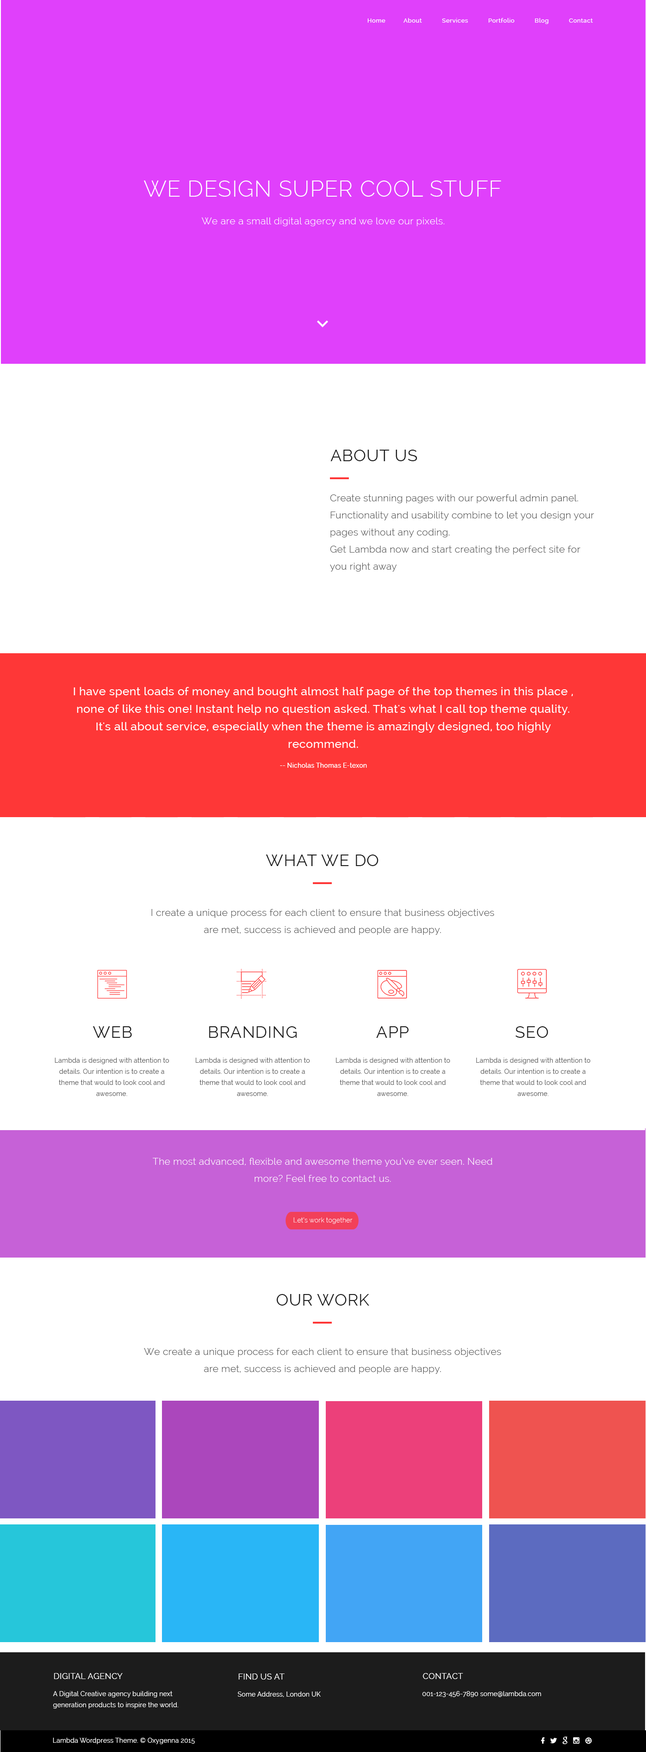
<style>
.page{position:relative;width:646px;height:1752px;background:#ffffff}
.page>*{position:absolute;margin:0}
.t1{font:6px "Raleway-Medium";letter-spacing:0.05em;color:#ffffff}
.t2{font:22.2px "Raleway-Light";letter-spacing:0.025em;color:#ffffff}
.t3{font:9.7px "Raleway-Light";letter-spacing:0.025em;color:#ffffff}
.t4{font:16.6px "Raleway";letter-spacing:0.025em;color:#1c1c1c}
.t5{font:9.7px/17.1px "Raleway-Light";letter-spacing:0.02em;color:#5c5c5c}
.t6{font:11.5px/17.5px "Raleway-Medium";letter-spacing:0.02em;color:#ffffff}
.t7{font:6.5px "Raleway-Medium";letter-spacing:0.02em;color:#ffffff}
.t8{font:6.5px/11.1px "Raleway";letter-spacing:0.02em;color:#5c5c5c}
.t9{font:9.7px/17.1px "Raleway-Light";letter-spacing:0.02em;color:#ffffff}
.t10{font:6.5px "Raleway-Light";letter-spacing:0.02em;color:#ffffff}
.t11{font:16.6px "Raleway";letter-spacing:0.02em;color:#1c1c1c}
.t12{font:8.3px "Raleway";letter-spacing:0.02em;color:#ffffff}
.t13{font:6.5px/11.1px "Raleway";letter-spacing:0.02em;color:#ffffff}
.t14{font:6.5px "Raleway";letter-spacing:0.02em;color:#ffffff}
</style>
<div class="page">
<p class="t1" style="left:368px;top:18px;width:225px;height:6px">Home About Services Portfolio Blog Contact</p>
<p class="t2" style="left:144px;top:180px;width:357px;height:17px">WE DESIGN SUPER COOL STUFF</p>
<p class="t3" style="left:202px;top:217px;width:242px;height:9px">We are a small digital agercy and we love our pixels.</p>
<p class="t4" style="left:330px;top:450px;width:87px;height:11px">ABOUT US</p>
<p class="t5" style="left:330px;top:494px;width:264px;height:77px">Create stunning pages with our powerful admin panel. Functionality and usability combine to let you design your pages without any coding.<br>Get Lambda now and start creating the perfect site for you right away</p>
<p class="t6" style="left:74px;top:687px;width:499px;height:61px;text-align:center">I have spent loads of money and bought almost half page of the top themes in this place , none of like this one! Instant help no question asked. That's what I call top theme quality. It's all about service, especially when the theme is amazingly designed, too highly recommend.</p>
<p class="t7" style="left:280px;top:762px;width:87px;height:6px">-- Nicholas Thomas E-texon</p>
<p class="t4" style="left:266px;top:854px;width:112px;height:12px">WHAT WE DO</p>
<p class="t5" style="left:151px;top:909px;width:343px;height:26px;text-align:center">I create a unique process for each client to ensure that business objectives are met, success is achieved and people are happy.</p>
<p class="t4" style="left:93px;top:1026px;width:39px;height:12px">WEB</p>
<p class="t4" style="left:209px;top:1026px;width:88px;height:12px">BRANDING</p>
<p class="t4" style="left:376px;top:1026px;width:33px;height:12px">APP</p>
<p class="t4" style="left:516px;top:1026px;width:32px;height:12px">SEO</p>
<p class="t8" style="left:55px;top:1057px;width:114px;height:39px;text-align:center">Lambda is designed with attention to details. Our intention is to create a theme that would to look cool and awesome.</p>
<p class="t8" style="left:196px;top:1057px;width:114px;height:39px;text-align:center">Lambda is designed with attention to details. Our intention is to create a theme that would to look cool and awesome.</p>
<p class="t8" style="left:336px;top:1057px;width:114px;height:39px;text-align:center">Lambda is designed with attention to details. Our intention is to create a theme that would to look cool and awesome.</p>
<p class="t8" style="left:476px;top:1057px;width:115px;height:39px;text-align:center">Lambda is designed with attention to details. Our intention is to create a theme that would to look cool and awesome.</p>
<p class="t9" style="left:153px;top:1158px;width:339px;height:24px;text-align:center">The most advanced, flexible and awesome theme you’ve ever seen. Need more? Feel free to contact us.</p>
<p class="t10" style="left:294px;top:1217px;width:59px;height:7px">Let’s work together</p>
<p class="t11" style="left:276px;top:1294px;width:94px;height:11px">OUR WORK</p>
<p class="t5" style="left:144px;top:1348px;width:357px;height:26px;text-align:center">We create a unique process for each client to ensure that business objectives are met, success is achieved and people are happy.</p>
<p class="t12" style="left:54px;top:1673px;width:69px;height:6px">DIGITAL AGENCY</p>
<p class="t12" style="left:239px;top:1673px;width:46px;height:6px">FIND US AT</p>
<p class="t12" style="left:423px;top:1673px;width:40px;height:6px">CONTACT</p>
<p class="t13" style="left:53px;top:1691px;width:126px;height:17px">A Digital Creative agency building next generation products to inspire the world.</p>
<p class="t14" style="left:238px;top:1691px;width:83px;height:6px">Some Address, London UK</p>
<p class="t14" style="left:422px;top:1691px;width:119px;height:6px">001-123-456-7890 some@lambda.com</p>
<p class="t14" style="left:53px;top:1737px;width:142px;height:7px">Lambda Wordpress Theme. © Oxygenna 2015</p>
</div>
